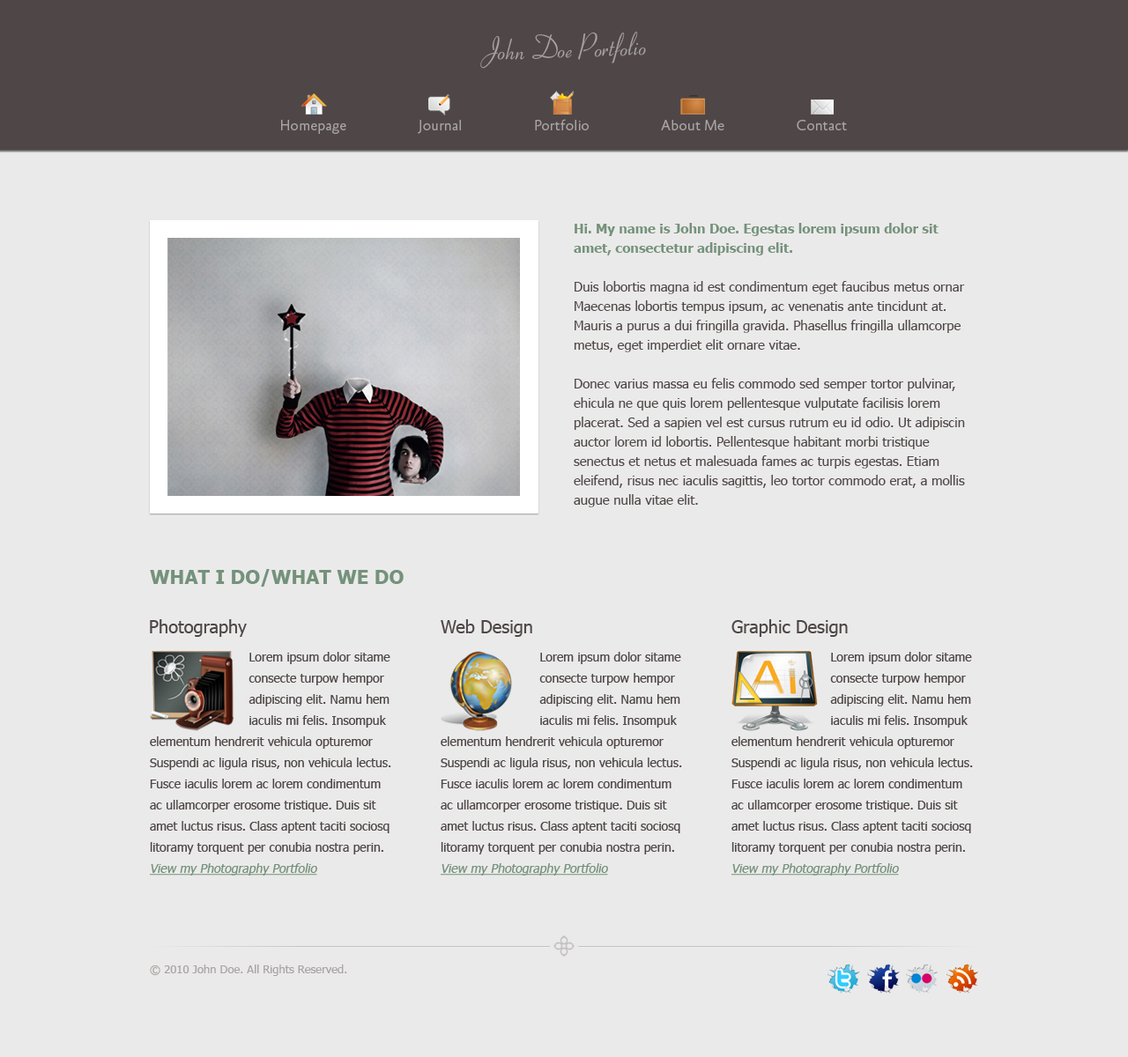
<style>
.page{position:relative;width:1128px;height:1057px;background:#ebeaea}
.page>*{position:absolute;margin:0}
.t1{font:32.6px "Ribbon131BT-Regular";color:#a9a5a5}
.t2{font:15px "AbsaraSans-Light";color:#a9a5a5}
.t3{font:13.2px/19.4px "Tahoma";color:#4f4747}
.t4{font:13.2px/19.4px "Tahoma-Bold";color:#74927b}
.t5{font:19.4px "Tahoma-Bold";color:#74927b}
.t6{font:17.6px "Tahoma";color:#4f4747}
.t7{font:12.3px/21.1px "Tahoma";color:#4f4747}
.t8{font:12.3px/21.1px "Tahoma";color:#74927b;font-style:italic;text-decoration:underline}
.t9{font:11.5px "Tahoma";color:#a9a5a4}
</style>
<div class="page">
<p class="t1" style="left:480px;top:31px;width:166px;height:38px;rotate:-2deg">John Doe Portfolio</p>
<p class="t2" style="left:281px;top:119px;width:566px;height:15px">Homepage                    Journal                    Portfolio                    About Me                    Contact</p>
<p class="t3" style="left:574px;top:223px;width:391px;height:285px"><span class="t4">Hi. My name is John Doe. Egestas lorem ipsum dolor sit amet, consectetur adipiscing elit. <br></span><br>Duis lobortis magna id est condimentum eget faucibus metus ornar Maecenas lobortis tempus ipsum, ac venenatis ante tincidunt at. Mauris a purus a dui fringilla gravida. Phasellus fringilla ullamcorpe metus, eget imperdiet elit ornare vitae. <br><br>Donec varius massa eu felis commodo sed semper tortor pulvinar,  ehicula ne que quis lorem pellentesque vulputate facilisis lorem placerat. Sed a sapien vel est cursus rutrum eu id odio. Ut adipiscin auctor lorem id lobortis. Pellentesque habitant morbi tristique senectus et netus et malesuada fames ac turpis egestas. Etiam eleifend, risus nec iaculis sagittis, leo tortor commodo erat, a mollis augue nulla vitae elit.</p>
<p class="t5" style="left:150px;top:569px;width:254px;height:18px">WHAT I DO/WHAT WE DO</p>
<p class="t6" style="left:150px;top:619px;width:97px;height:18px">Photography</p>
<p class="t6" style="left:441px;top:619px;width:91px;height:18px">Web Design</p>
<p class="t6" style="left:731px;top:619px;width:117px;height:18px">Graphic Design</p>
<p class="t7" style="left:150px;top:652px;width:241px;height:224px">Lorem ipsum dolor sitame      consecte turpow hempor      adipiscing elit. Namu hem       iaculis mi felis. Insompuk elementum hendrerit vehicula opturemor Suspendi ac ligula risus, non vehicula lectus. Fusce iaculis lorem ac lorem condimentum ac ullamcorper erosome tristique. Duis sit amet luctus risus. Class aptent taciti sociosq  litoramy torquent per conubia nostra perin.<br><span class="t8">View my Photography Portfolio</span></p>
<p class="t7" style="left:441px;top:652px;width:241px;height:224px">Lorem ipsum dolor sitame      consecte turpow hempor      adipiscing elit. Namu hem       iaculis mi felis. Insompuk elementum hendrerit vehicula opturemor Suspendi ac ligula risus, non vehicula lectus. Fusce iaculis lorem ac lorem condimentum ac ullamcorper erosome tristique. Duis sit amet luctus risus. Class aptent taciti sociosq  litoramy torquent per conubia nostra perin.<br><span class="t8">View my Photography Portfolio</span></p>
<p class="t7" style="left:731px;top:652px;width:242px;height:224px">Lorem ipsum dolor sitame      consecte turpow hempor      adipiscing elit. Namu hem       iaculis mi felis. Insompuk elementum hendrerit vehicula opturemor Suspendi ac ligula risus, non vehicula lectus. Fusce iaculis lorem ac lorem condimentum ac ullamcorper erosome tristique. Duis sit amet luctus risus. Class aptent taciti sociosq  litoramy torquent per conubia nostra perin.<br><span class="t8">View my Photography Portfolio</span></p>
<p class="t9" style="left:150px;top:965px;width:197px;height:11px">© 2010 John Doe. All Rights Reserved.</p>
</div>
